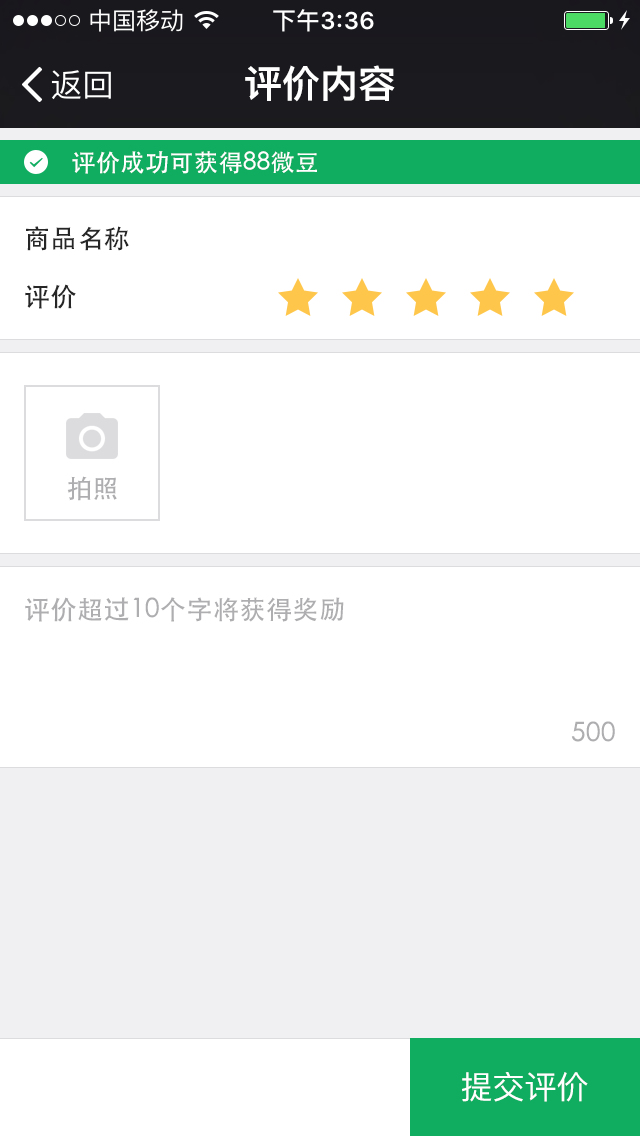
<style>
.page{position:relative;width:640px;height:1136px;background:#ffffff}
.page>*{position:absolute;margin:0}
.t1{font:38px "PingFangSC-Semibold";color:#ffffff}
.t2{font:24px "STHeitiSC-Medium";letter-spacing:0.02em;color:#ffffff}
.t3{font:26px "STHeitiSC-Medium";letter-spacing:0.02em;color:#262626}
.t4{font:26px "STHeitiSC-Medium";letter-spacing:0.02em;color:#aeaeb0}
.t5{font:32px "PingFangSC-Regular";color:#ffffff}
</style>
<div class="page">
<p class="t1" style="left:245px;top:65px;width:150px;height:37px">评价内容</p>
<p class="t2" style="left:72px;top:151px;width:245px;height:23px">评价成功可获得88微豆</p>
<p class="t3" style="left:26px;top:226px;width:103px;height:25px">商品名称</p>
<p class="t3" style="left:25px;top:284px;width:51px;height:25px">评价</p>
<p class="t4" style="left:67px;top:476px;width:50px;height:25px">拍照</p>
<p class="t4" style="left:25px;top:597px;width:319px;height:25px">评价超过10个字将获得奖励</p>
<p class="t4" style="left:571px;top:721px;width:44px;height:21px">500</p>
<p class="t5" style="left:462px;top:1072px;width:126px;height:30px">提交评价</p>
</div>
